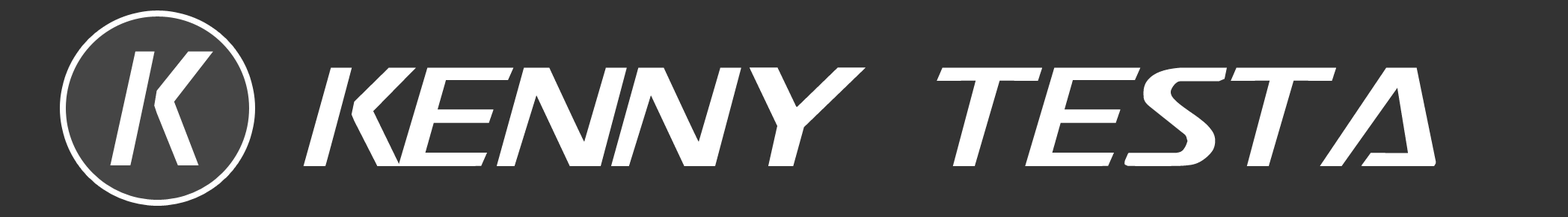
<style>
.page{position:relative;width:1568px;height:217px;background:#333333}
.page>*{position:absolute;margin:0}
.t1{font:151.2px "Postmaster";letter-spacing:-0.06em;color:#ffffff;scale:1.27 1}
</style>
<div class="page">
<p class="t1" style="left:303px;top:67px;width:1133px;height:99px">kenny testa</p>
</div>
